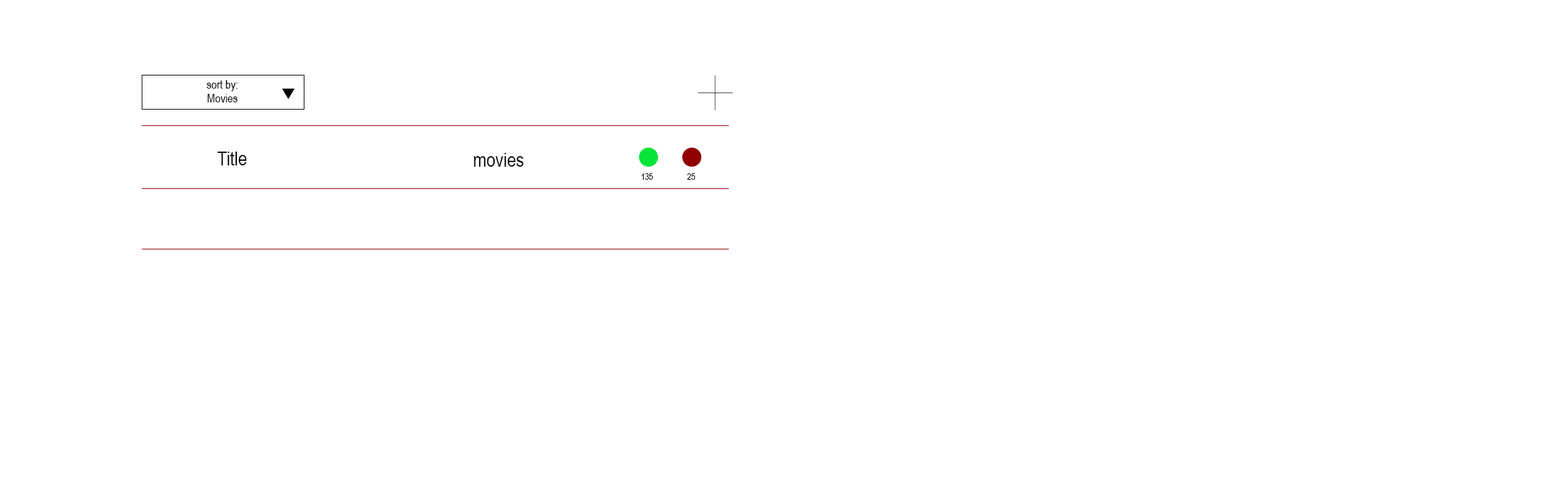
<style>
.page{position:relative;width:1568px;height:504px;background:#ffffff}
.page>*{position:absolute;margin:0}
.t1{font:11.8px "ArialNarrow";color:#0a0b0b}
.t2{font:19.7px "ArialNarrow";color:#0a0b0b}
.t3{font:8.9px "ArialNarrow";color:#0a0b0b}
</style>
<div class="page">
<p class="t1" style="left:207px;top:80px;width:30px;height:22px;text-align:center">sort by:<br>Movies</p>
<p class="t2" style="left:217px;top:152px;width:30px;height:13px">Title</p>
<p class="t2" style="left:474px;top:153px;width:50px;height:14px">movies</p>
<p class="t3" style="left:641px;top:173px;width:12px;height:7px">135</p>
<p class="t3" style="left:687px;top:173px;width:8px;height:7px">25</p>
</div>
